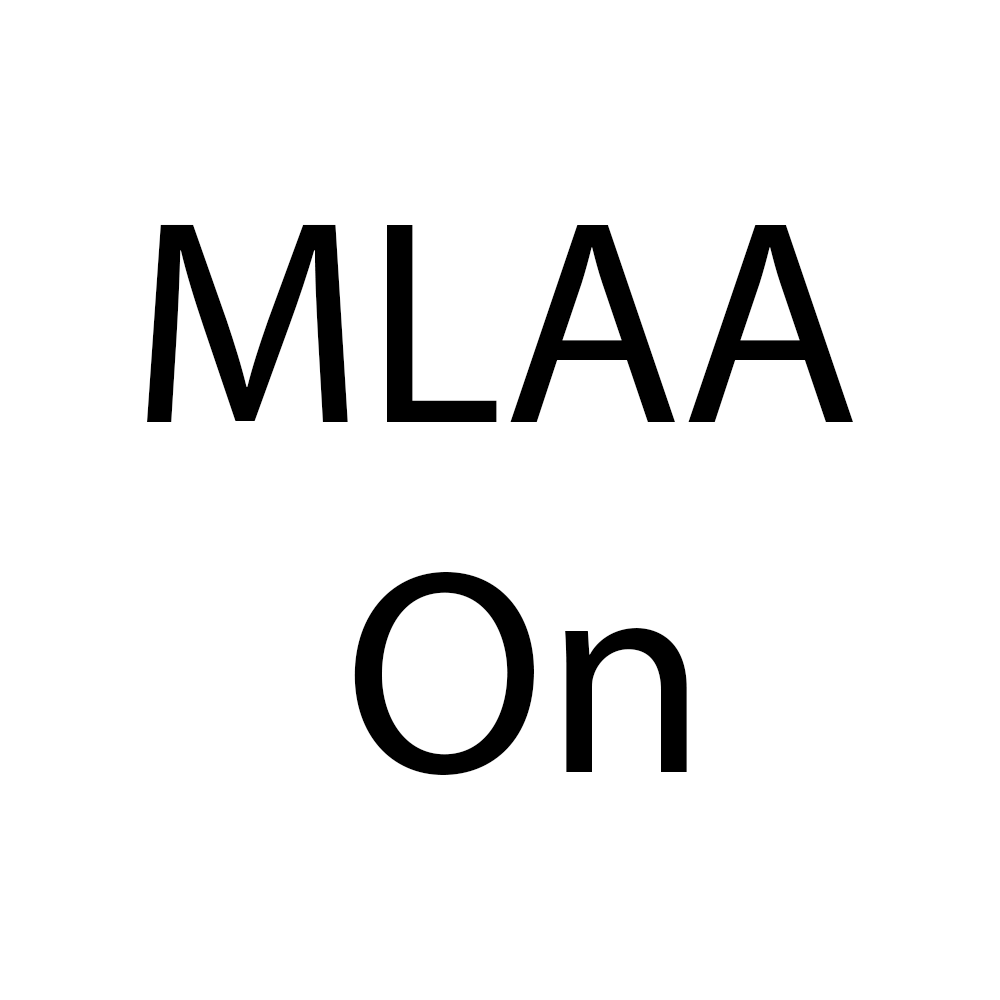
<style>
.page{position:relative;width:1000px;height:1000px;background:#ffffff}
.page>*{position:absolute;margin:0}
.t1{font:291.7px "MyriadPro-Regular";color:#000000}
</style>
<div class="page">
<p class="t1" style="left:147px;top:224px;width:706px;height:552px;text-align:center">MLAA <br>On</p>
</div>
